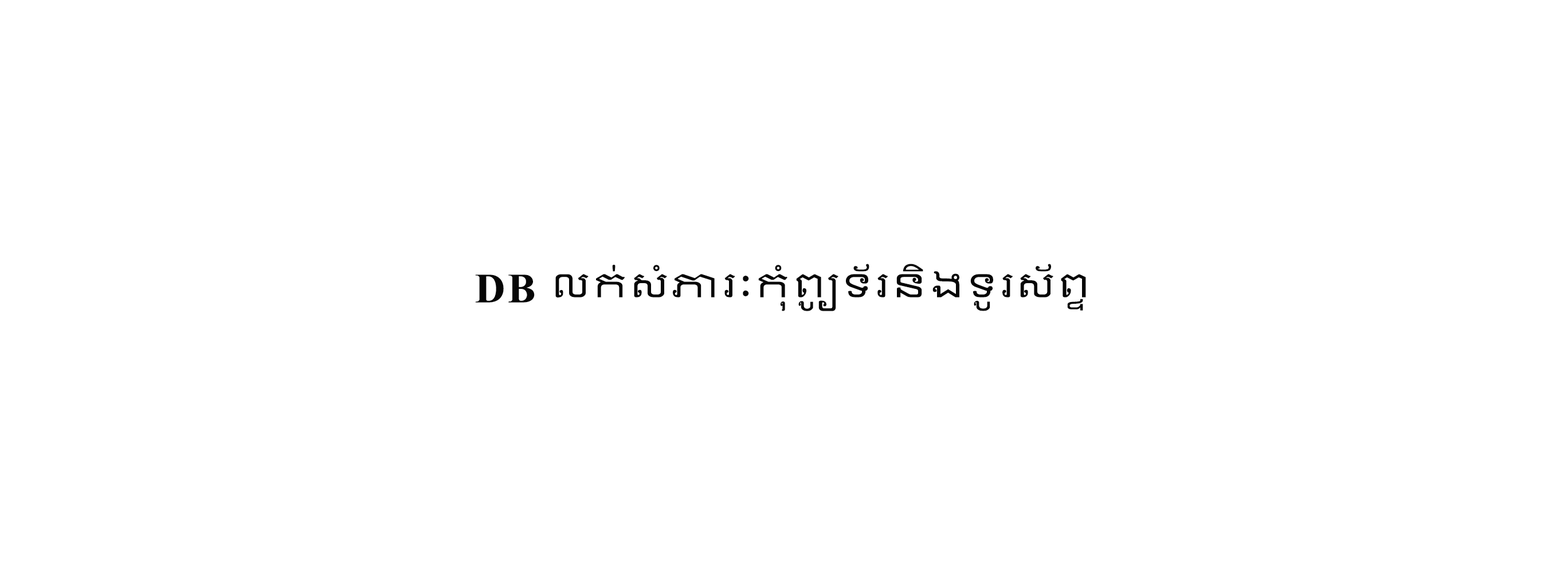
<style>
.page{position:relative;width:1568px;height:580px;background:#ffffff}
.page>*{position:absolute;margin:0}
.t1{font:41.8px "LeelawadeeUI";letter-spacing:0.06em;color:#060606}
.t2{font:41.8px "TimesNewRomanPS-BoldMT";letter-spacing:0.06em;color:#060606}
</style>
<div class="page">
<p class="t1" style="left:475px;top:264px;width:611px;height:47px"><span class="t2">DB </span>លក់សំភារៈកុំព្យូទ័រនិងទូរស័ព្ទ</p>
</div>
